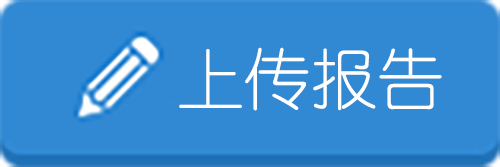
<style>
.page{position:relative;width:500px;height:167px;background:#3189d3}
.page>*{position:absolute;margin:0}
.t1{font:66.7px "YouYuan";color:#ffffff}
</style>
<div class="page">
<p class="t1" style="left:179px;top:47px;width:263px;height:64px">上传报告</p>
</div>
